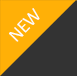
<style>
.page{position:relative;width:77px;height:76px;background:#333333}
.page>*{position:absolute;margin:0}
.t1{font:19px "Calibri";letter-spacing:-0.025em;color:#fcfcfc}
</style>
<div class="page">
<p class="t1" style="left:9px;top:8px;width:31px;height:34px;rotate:-46deg">NEW</p>
</div>
